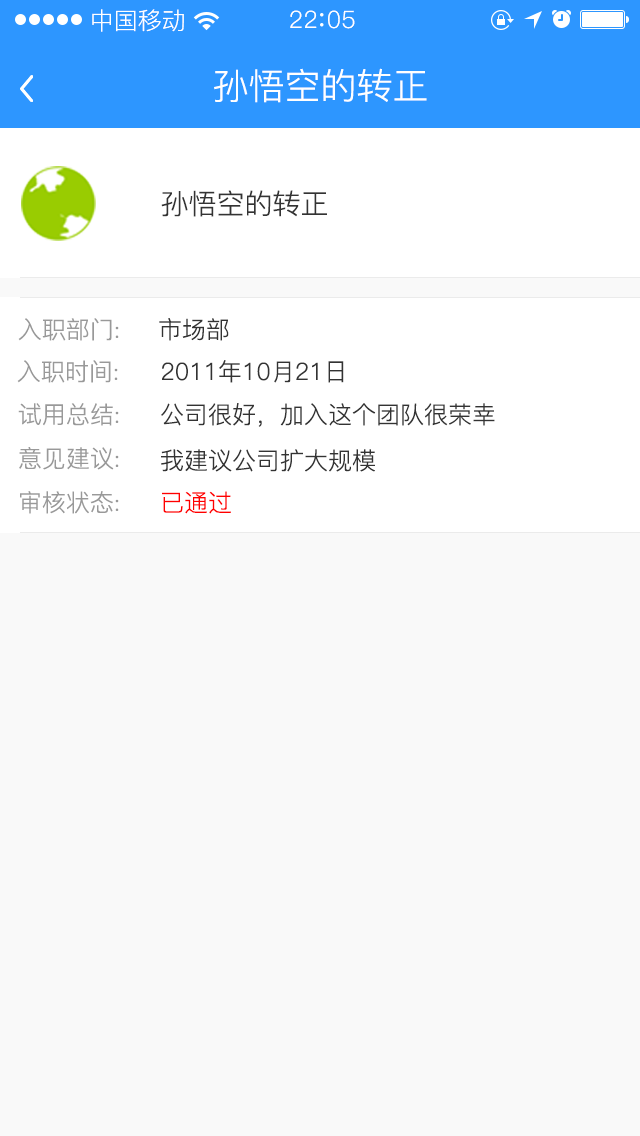
<style>
.page{position:relative;width:640px;height:1136px;background:#f9f9f9}
.page>*{position:absolute;margin:0}
.t1{font:24px "PingFang-SC-Regular";color:#ffffff}
.t2{font:24px "PingFang-SC-Regular";letter-spacing:0.03em;color:#ffffff}
.t3{font:36px "PingFang-SC-Regular";color:#ffffff}
.t4{font:28px "PingFang-SC-Regular";color:#333333}
.t5{font:24px "PingFang-SC-Regular";color:#999999}
.t6{font:24px "PingFang-SC-Regular";color:#333333}
.t7{font:24px "PingFang-SC-Regular";color:#ff0000}
</style>
<div class="page">
<p class="t1" style="left:92px;top:9px;width:92px;height:23px">中国移动</p>
<p class="t2" style="left:290px;top:10px;width:65px;height:19px">22 05</p>
<p class="t3" style="left:214px;top:68px;width:213px;height:35px">孙悟空的转正</p>
<p class="t4" style="left:161px;top:190px;width:166px;height:27px">孙悟空的转正</p>
<p class="t5" style="left:18px;top:318px;width:101px;height:23px">入职部门:</p>
<p class="t6" style="left:159px;top:318px;width:70px;height:23px">市场部</p>
<p class="t5" style="left:17px;top:360px;width:101px;height:23px">入职时间:</p>
<p class="t6" style="left:162px;top:360px;width:182px;height:23px">2011年10月21日</p>
<p class="t5" style="left:18px;top:403px;width:101px;height:23px">试用总结:</p>
<p class="t6" style="left:161px;top:403px;width:334px;height:24px">公司很好，加入这个团队很荣幸</p>
<p class="t5" style="left:19px;top:447px;width:100px;height:23px">意见建议:</p>
<p class="t6" style="left:161px;top:449px;width:214px;height:23px">我建议公司扩大规模</p>
<p class="t5" style="left:20px;top:491px;width:99px;height:23px">审核状态:</p>
<p class="t7" style="left:162px;top:491px;width:69px;height:23px">已通过</p>
</div>
